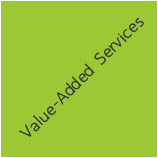
<style>
.page{position:relative;width:158px;height:158px;background:#9cc835}
.page>*{position:absolute;margin:0}
.t1{font:24.3px "ThaiSansLite";color:#33383b}
</style>
<div class="page">
<p class="t1" style="left:18px;top:17px;width:126px;height:120px;rotate:-45deg">Value-Added Services</p>
</div>
